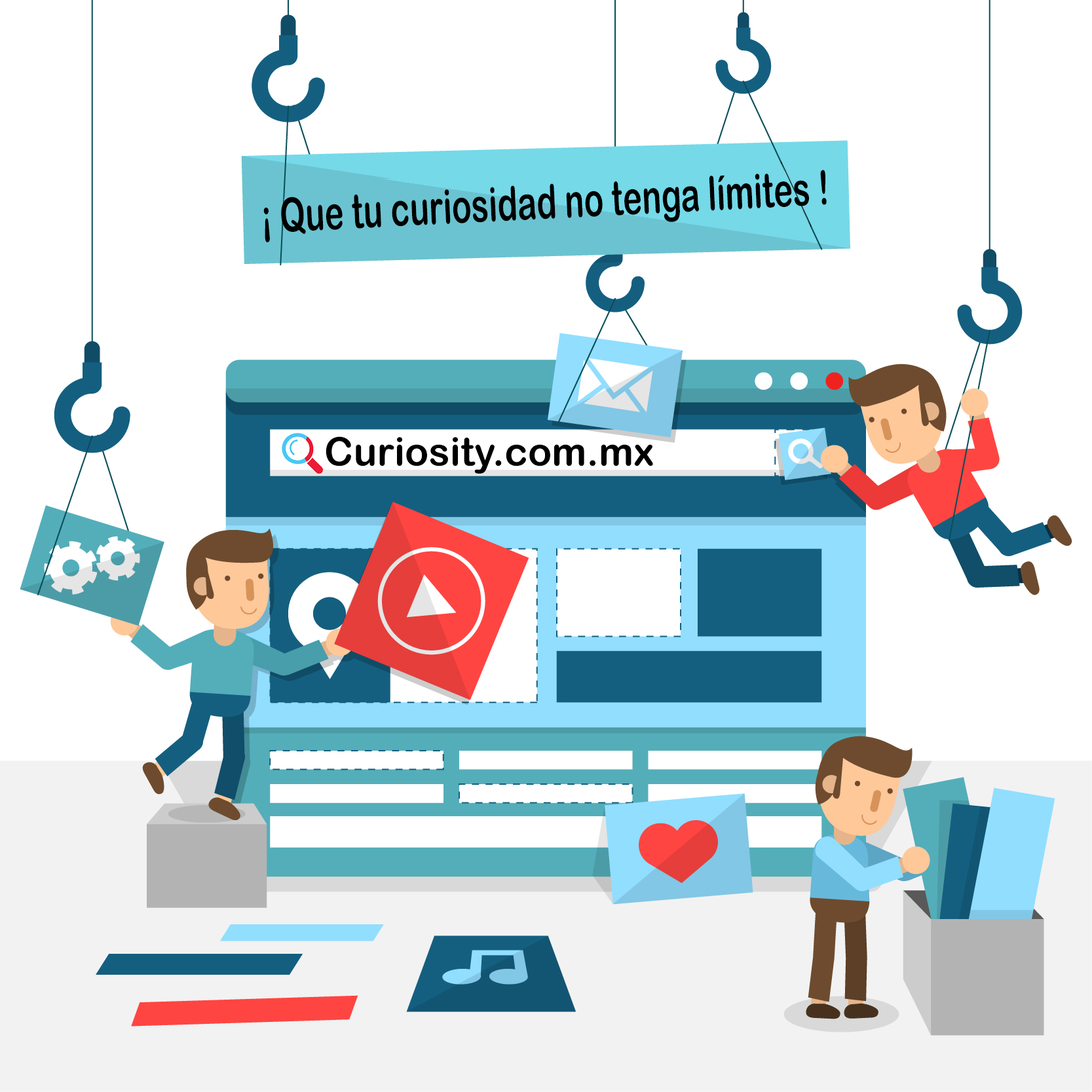
<style>
.page{position:relative;width:1092px;height:1092px;background:#ffffff}
.page>*{position:absolute;margin:0}
.t1{font:47px "ArialRoundedMTBold";color:#000000;scale:0.68 1}
.t2{font:39.3px "ArialRoundedMTBold";color:#000000}
</style>
<div class="page">
<p class="t1" style="left:263px;top:170px;width:564px;height:72px;rotate:-3deg">¡ Que tu curiosidad no tenga límites !</p>
<p class="t2" style="left:326px;top:436px;width:327px;height:38px">Curiosity.com.mx</p>
</div>
